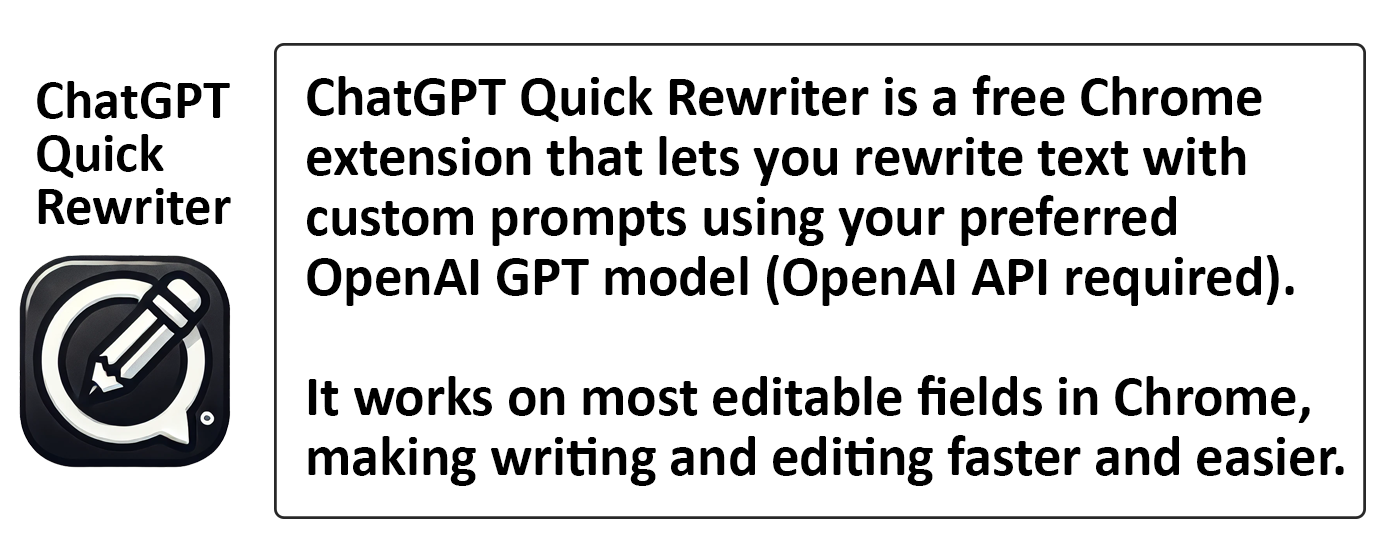
<style>
.page{position:relative;width:1400px;height:560px;background:#ffffff}
.page>*{position:absolute;margin:0}
.t1{font:56.6px/60px "Calibri-Bold";color:#000000}
.t2{font:54.7px/53.3px "Calibri-Bold";color:#000000}
</style>
<div class="page">
<p class="t1" style="left:307px;top:75px;width:1037px;height:411px">ChatGPT Quick Rewriter is a free Chrome <br>extension that lets you rewrite text with <br>custom prompts using your preferred <br>OpenAI GPT model (OpenAI API required). <br><br>It works on most editable fields in Chrome, <br>making writing and editing faster and easier.</p>
<p class="t2" style="left:37px;top:81px;width:194px;height:144px">ChatGPT<br>Quick<br>Rewriter</p>
</div>
